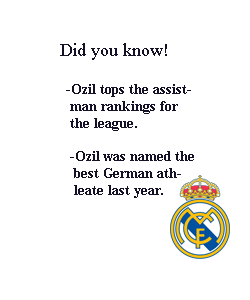
<style>
.page{position:relative;width:250px;height:300px;background:#ffffff}
.page>*{position:absolute;margin:0}
.t1{font:14px "TimesNewRomanPS-BoldMT";color:#141126}
.t2{font:24px "VladimirScript";color:#141126}
.t3{font:18px "TimesNewRomanPSMT";color:#141126}
</style>
<div class="page">
<p class="t1" style="left:60px;top:43px;width:134px;height:155px"><span class="t2"><br>  </span><span class="t3">Did you know!<br><br>    </span>-Ozil tops the assist-<br>     man rankings for<br>     the league.<br><br>     -Ozil was named the<br>      best German ath-<br>      leate last year.</p>
</div>
